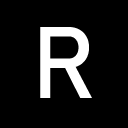
<style>
.page{position:relative;width:128px;height:128px;background:#000000}
.page>*{position:absolute;margin:0}
.t1{font:100px "Bahnschrift";color:#ffffff}
</style>
<div class="page">
<p class="t1" style="left:40px;top:27px;width:52px;height:71px">R</p>
</div>
